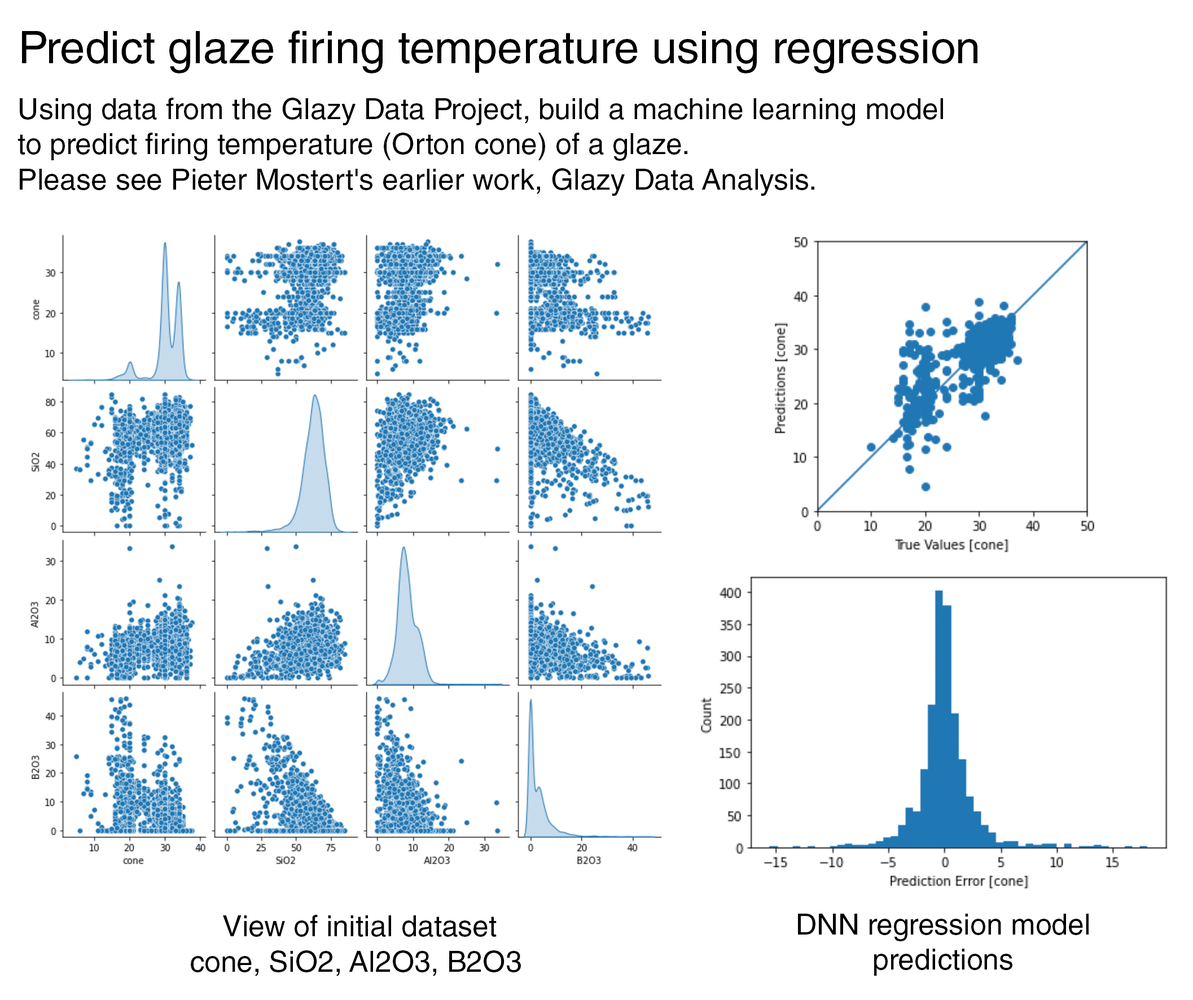
<style>
.page{position:relative;width:1193px;height:1000px;background:#ffffff}
.page>*{position:absolute;margin:0}
.t1{font:45.1px "HelveticaLTStd-Roman";color:#000000}
.t2{font:29.3px "HelveticaLTStd-Roman";color:#000000}
</style>
<div class="page">
<p class="t1" style="left:22px;top:30px;width:955px;height:43px">Predict glaze firing temperature using regression</p>
<p class="t2" style="left:17px;top:98px;width:926px;height:98px">Using data from the Glazy Data Project, build a machine learning model<br>to predict firing temperature (Orton cone) of a glaze. <br>Please see Pieter Mostert's earlier work, Glazy Data Analysis.</p>
<p class="t2" style="left:191px;top:915px;width:330px;height:61px;text-align:center">View of initial dataset<br>cone, SiO2, Al2O3, B2O3</p>
<p class="t2" style="left:798px;top:913px;width:290px;height:63px;text-align:center">DNN regression model<br>predictions</p>
</div>
